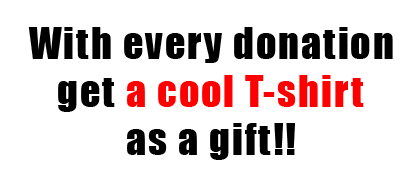
<style>
.page{position:relative;width:420px;height:180px;background:#ffffff}
.page>*{position:absolute;margin:0}
.t1{font:40px "Impact";letter-spacing:0.05em;color:#000000}
.t2{font:40px "Impact";letter-spacing:0.05em;color:#ff0000}
</style>
<div class="page">
<p class="t1" style="left:28px;top:27px;width:365px;height:133px;text-align:center">With every donation<br>get <span class="t2">a cool T-shirt<br></span>as a gift!!</p>
</div>
